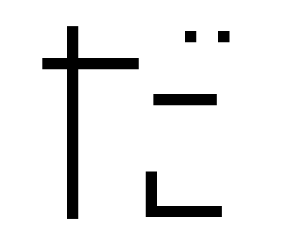
<style>
.page{position:relative;width:300px;height:250px;background:#ffffff}
.page>*{position:absolute;margin:0}
.t1{font:241.8px "TA-rb0925";letter-spacing:0.08em;color:#000000}
</style>
<div class="page">
<p class="t1" style="left:42px;top:26px;width:188px;height:193px">だ</p>
</div>
